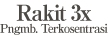
<style>
.page{position:relative;width:108px;height:39px;background:#ffffff}
.page>*{position:absolute;margin:0}
.t1{font:12px/12px "RyuminPro-ExBold";letter-spacing:-0.08em;color:#4c4843}
.t2{font:22px/20px "RyuminPro-ExBold";letter-spacing:-0.08em;color:#4c4843}
</style>
<div class="page">
<p class="t1" style="left:0px;top:4px;width:108px;height:31px;text-align:center"><span class="t2">Rakit 3x<br></span>Pngmb. Terkosentrasi</p>
</div>
